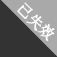
<style>
.page{position:relative;width:57px;height:57px;background:#333333}
.page>*{position:absolute;margin:0}
.t1{font:15px "SimSun";color:#ffffff;font-weight:bold}
</style>
<div class="page">
<p class="t1" style="left:17px;top:2px;width:38px;height:39px;rotate:45deg">已失效</p>
</div>
